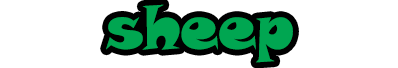
<style>
.page{position:relative;width:398px;height:68px;background:#ffffff}
.page>*{position:absolute;margin:0}
.t1{font:60px "SnapITC-Regular";color:#00a651}
</style>
<div class="page">
<p class="t1" style="left:106px;top:4px;width:187px;height:59px">sheep</p>
</div>
